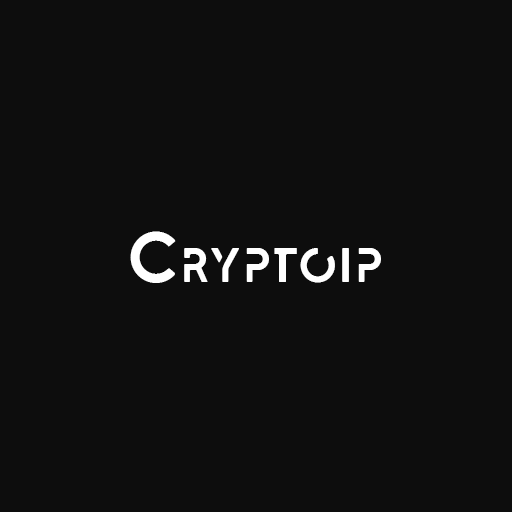
<style>
.page{position:relative;width:512px;height:512px;background:#0d0d0d}
.page>*{position:absolute;margin:0}
.t1{font:48px "LEIXO-DEMO";color:#ffffff}
.t2{font:72px "LEIXO-DEMO";color:#ffffff}
</style>
<div class="page">
<p class="t1" style="left:130px;top:231px;width:251px;height:52px"><span class="t2">C</span>RYPTOIP</p>
</div>
